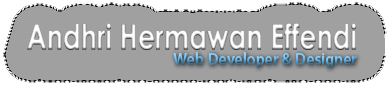
<style>
.page{position:relative;width:390px;height:86px;background:#a0a0a0}
.page>*{position:absolute;margin:0}
.t1{font:34.4px "CenturyGothic-Bold";scale:0.78 1}
.t2{font:17.5px "MyriadPro-Semibold";scale:0.91 1}
</style>
<div class="page">
<p class="t1" style="left:27px;top:23px;width:330px;height:27px">Andhri Hermawan Effendi</p>
<p class="t2" style="left:173px;top:52px;width:184px;height:16px">Web Developer &amp; Designer</p>
</div>
